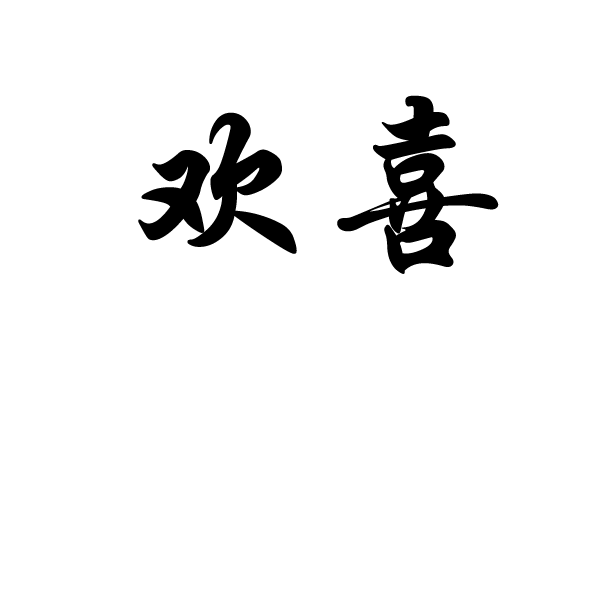
<style>
.page{position:relative;width:600px;height:600px;background:#ffffff}
.page>*{position:absolute;margin:0}
.t1{font:192px "STXingkai";color:#000000;font-weight:bold}
</style>
<div class="page">
<p class="t1" style="left:138px;top:95px;width:361px;height:179px">欢喜</p>
</div>
